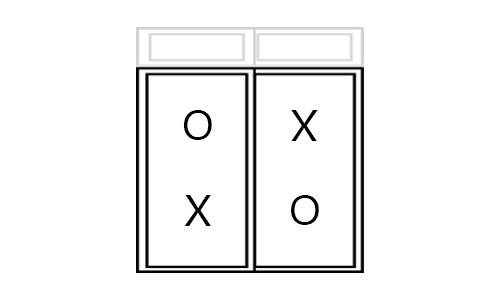
<style>
.page{position:relative;width:500px;height:300px;background:#ffffff}
.page>*{position:absolute;margin:0}
.t1{font:42.3px "MicrosoftTaiLe";color:#000000}
.t2{font:44.2px "MicrosoftTaiLe";color:#000000;scale:1.05 1}
</style>
<div class="page">
<p class="t1" style="left:183px;top:110px;width:29px;height:30px">O</p>
<p class="t2" style="left:291px;top:110px;width:27px;height:31px;rotate:180deg">X</p>
<p class="t2" style="left:184px;top:195px;width:27px;height:31px">X</p>
<p class="t1" style="left:291px;top:195px;width:28px;height:30px;rotate:180deg">O</p>
</div>
